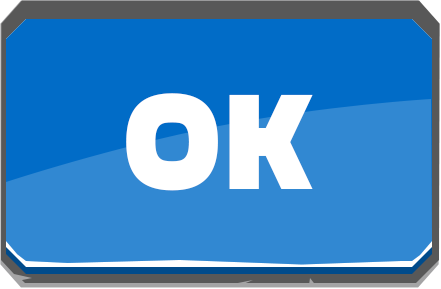
<style>
.page{position:relative;width:441px;height:289px;background:#3188d2}
.page>*{position:absolute;margin:0}
.t1{font:132.5px "MovaviGrotesqueBlack";color:#ffffff}
</style>
<div class="page">
<p class="t1" style="left:126px;top:93px;width:187px;height:98px">OK</p>
</div>
